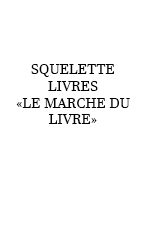
<style>
.page{position:relative;width:150px;height:225px;background:#ffffff}
.page>*{position:absolute;margin:0}
.t1{font:14px "JavaneseText";color:#000000}
</style>
<div class="page">
<p class="t1" style="left:16px;top:64px;width:114px;height:60px;text-align:center">SQUELETTE<br>LIVRES<br>«LE MARCHE DU<br>LIVRE»</p>
</div>
